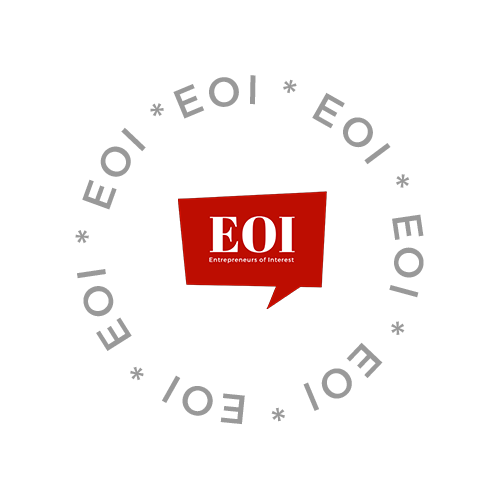
<style>
.page{position:relative;width:500px;height:500px;background:#ffffff}
.page>*{position:absolute;margin:0}
.t1{font:41px "Gotham-Medium";letter-spacing:0.06em;color:#999999}
</style>
<div class="page">
<p class="t1" style="left:75px;top:75px;width:349px;height:350px">EOI * EOI * EOI * EOI * EOI * EOI * EOI *</p>
</div>
